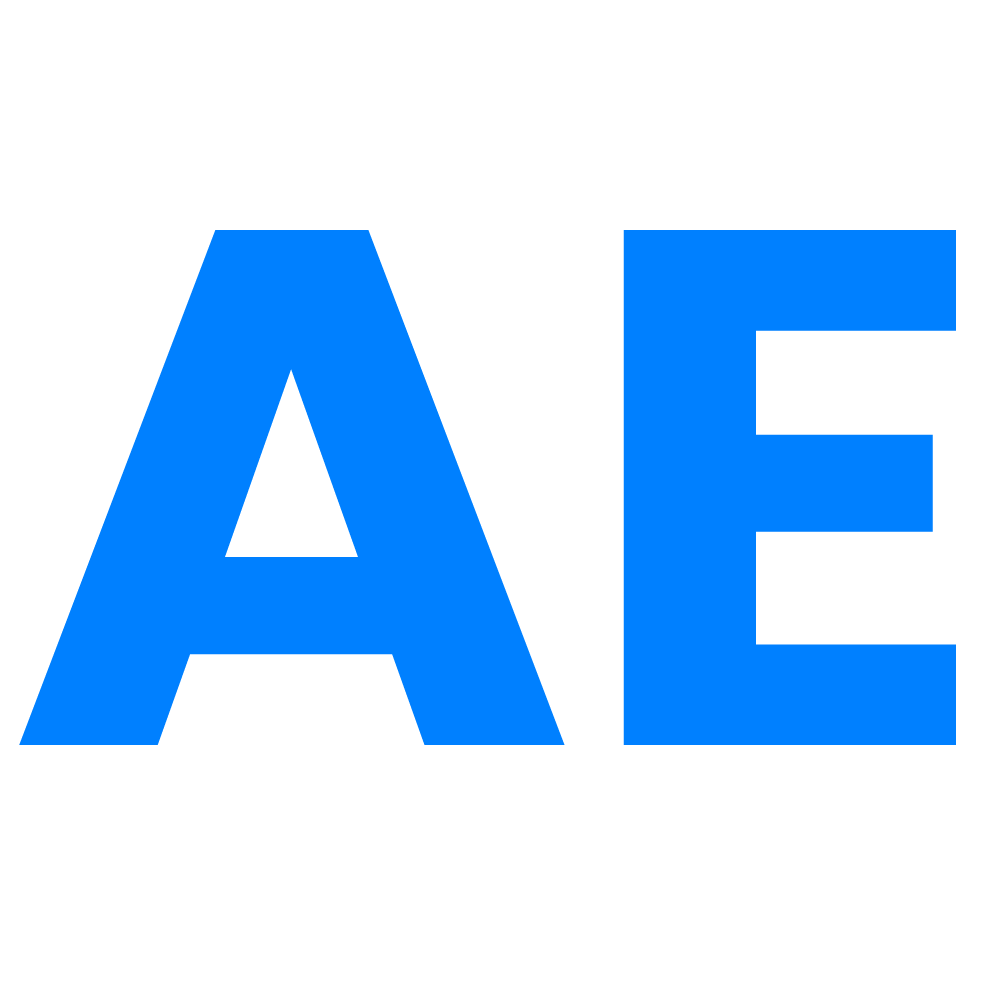
<style>
.page{position:relative;width:1000px;height:1000px;background:#ffffff}
.page>*{position:absolute;margin:0}
.t1{font:733.4px "Poppins-Bold";color:#0080ff;scale:1.05 1}
</style>
<div class="page">
<p class="t1" style="left:19px;top:230px;width:937px;height:515px">AE</p>
</div>
